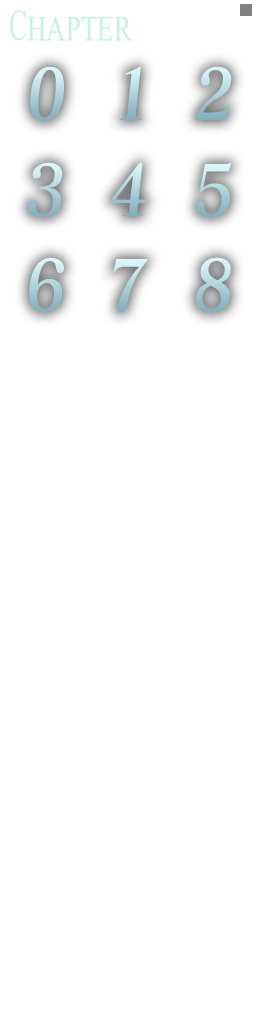
<style>
.page{position:relative;width:256px;height:1024px;background:#ffffff}
.page>*{position:absolute;margin:0}
.t1{font:70.4px "MatisseElegantoPro-BEdit";scale:0.89 1}
</style>
<div class="page">
<p class="t1" style="left:30px;top:66px;width:34px;height:55px">0</p>
<p class="t1" style="left:120px;top:66px;width:22px;height:54px">1</p>
<p class="t1" style="left:195px;top:66px;width:37px;height:54px">2</p>
<p class="t1" style="left:28px;top:162px;width:35px;height:55px">3</p>
<p class="t1" style="left:196px;top:163px;width:36px;height:54px">5</p>
<p class="t1" style="left:29px;top:257px;width:35px;height:55px">6</p>
<p class="t1" style="left:196px;top:257px;width:35px;height:55px">8</p>
</div>
